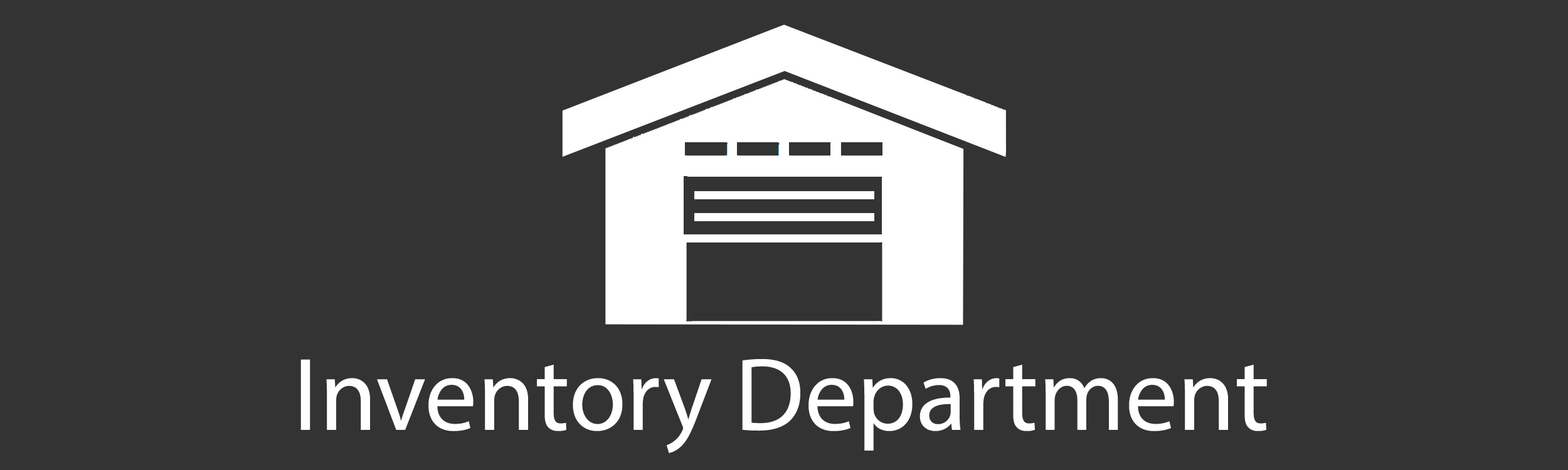
<style>
.page{position:relative;width:1568px;height:470px;background:#333333}
.page>*{position:absolute;margin:0}
.t1{font:104.5px "MyriadPro-Regular";color:#ffffff}
</style>
<div class="page">
<p class="t1" style="left:300px;top:359px;width:967px;height:94px">Inventory Department</p>
</div>
